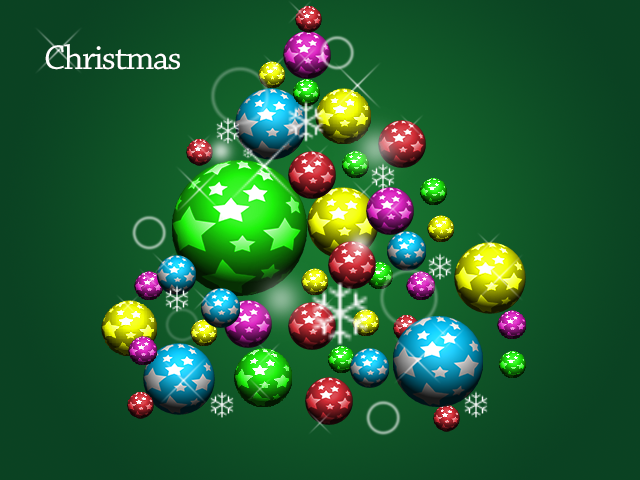
<style>
.page{position:relative;width:640px;height:480px}
.page>*{position:absolute;margin:0}
.t1{font:36px "ChaparralPro-Regular";letter-spacing:-0.05em;color:#ffffff}
</style>
<div class="page">
<p class="t1" style="left:45px;top:44px;width:135px;height:26px">Christmas</p>
</div>
